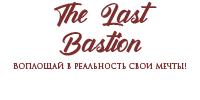
<style>
.page{position:relative;width:200px;height:100px;background:#ffffff}
.page>*{position:absolute;margin:0}
.t1{font:24px "AntonellieCalligraphyDemo";color:#7e2e2e}
.t2{font:8px "TrajanPro3-Regular";color:#7e2e2e}
</style>
<div class="page">
<p class="t1" style="left:54px;top:2px;width:103px;height:54px;text-align:center">The Last<br>Bastion</p>
<p class="t2" style="left:13px;top:62px;width:174px;height:8px">Воплощай в реальность свои мечты!</p>
</div>
